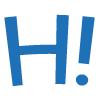
<style>
.page{position:relative;width:100px;height:100px;background:#ffffff}
.page>*{position:absolute;margin:0}
.t1{font:91.7px "Stark";color:#1f71b7;text-transform:uppercase}
</style>
<div class="page">
<p class="t1" style="left:4px;top:14px;width:91px;height:73px">H!</p>
</div>
